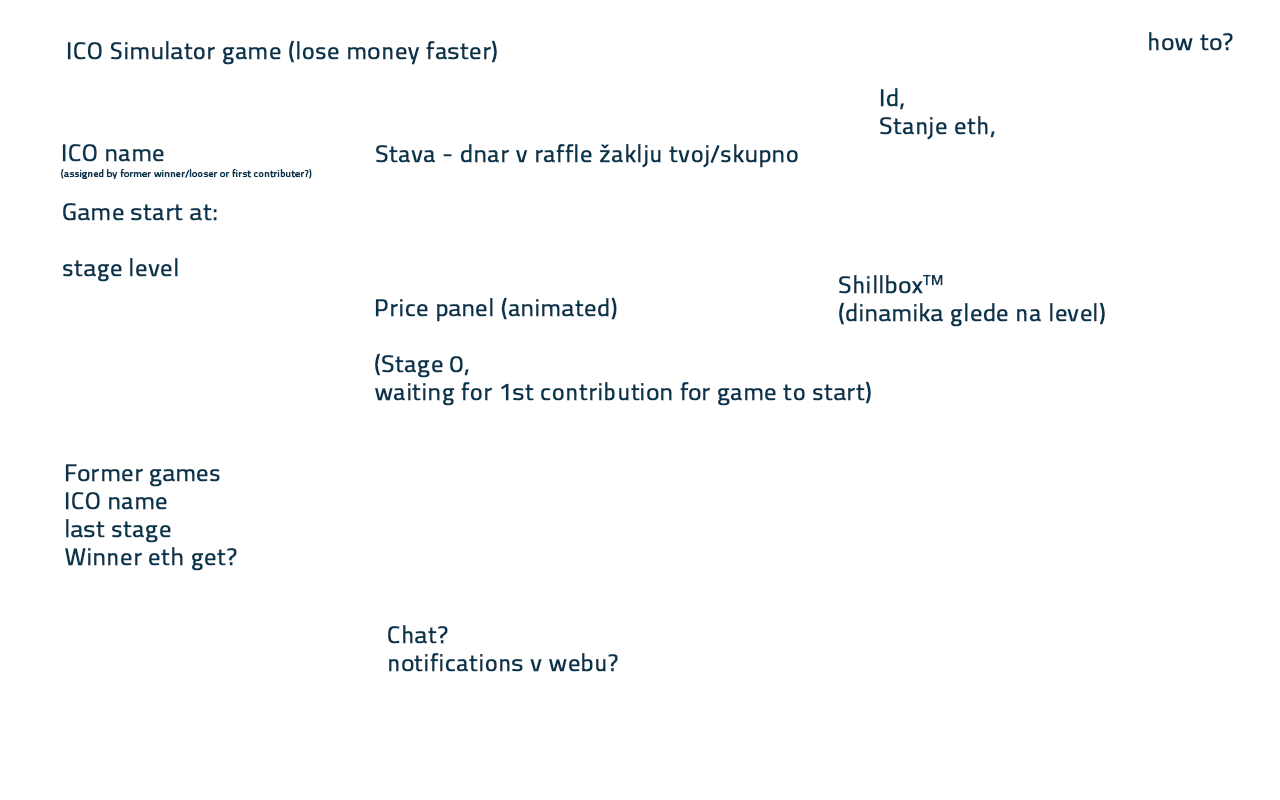
<style>
.page{position:relative;width:1280px;height:800px;background:#ffffff}
.page>*{position:absolute;margin:0}
.t1{font:24px "Titillium-Regular";letter-spacing:0.01em;color:#08344d;font-weight:bold}
.t2{font:24px/28px "Titillium-Regular";letter-spacing:0.01em;color:#08344d;font-weight:bold}
.t3{font:10px/28px "Titillium-Regular";letter-spacing:0.01em;color:#08344d;font-weight:bold}
</style>
<div class="page">
<p class="t1" style="left:67px;top:40px;width:430px;height:25px">ICO Simulator game (lose money faster)</p>
<p class="t1" style="left:1149px;top:32px;width:84px;height:19px">how to?</p>
<p class="t2" style="left:376px;top:88px;width:619px;height:80px;text-align:justify">Id,  <br>              Stanje eth, <br>Stava - dnar v raffle žaklju tvoj/skupno</p>
<p class="t3" style="left:61px;top:144px;width:251px;height:35px;text-align:justify"><span class="t2">ICO name <br></span>(assigned by former winner/looser or first contributer?)</p>
<p class="t2" style="left:63px;top:203px;width:154px;height:79px;text-align:justify">Game start at:<br><br>stage level</p>
<p class="t2" style="left:839px;top:275px;width:266px;height:52px;text-align:justify">ShillboxTM <br>(dinamika glede na level)</p>
<p class="t2" style="left:375px;top:297px;width:496px;height:109px;text-align:justify">Price panel (animated)<br><br>(Stage 0, <br>waiting for 1st contribution for game to start)</p>
<p class="t2" style="left:65px;top:464px;width:172px;height:107px;text-align:justify">Former games<br>ICO name<br>last stage<br>Winner eth get?</p>
<p class="t2" style="left:388px;top:625px;width:230px;height:47px;text-align:justify">Chat? <br>notifications v webu?</p>
</div>
